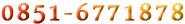
<style>
.page{position:relative;width:185px;height:24px;background:#ffffff}
.page>*{position:absolute;margin:0}
.t1{font:36px "ArabicTypesetting";letter-spacing:0.08em;font-weight:bold}
</style>
<div class="page">
<p class="t1" style="left:1px;top:3px;width:183px;height:21px">0851-6771878</p>
</div>
